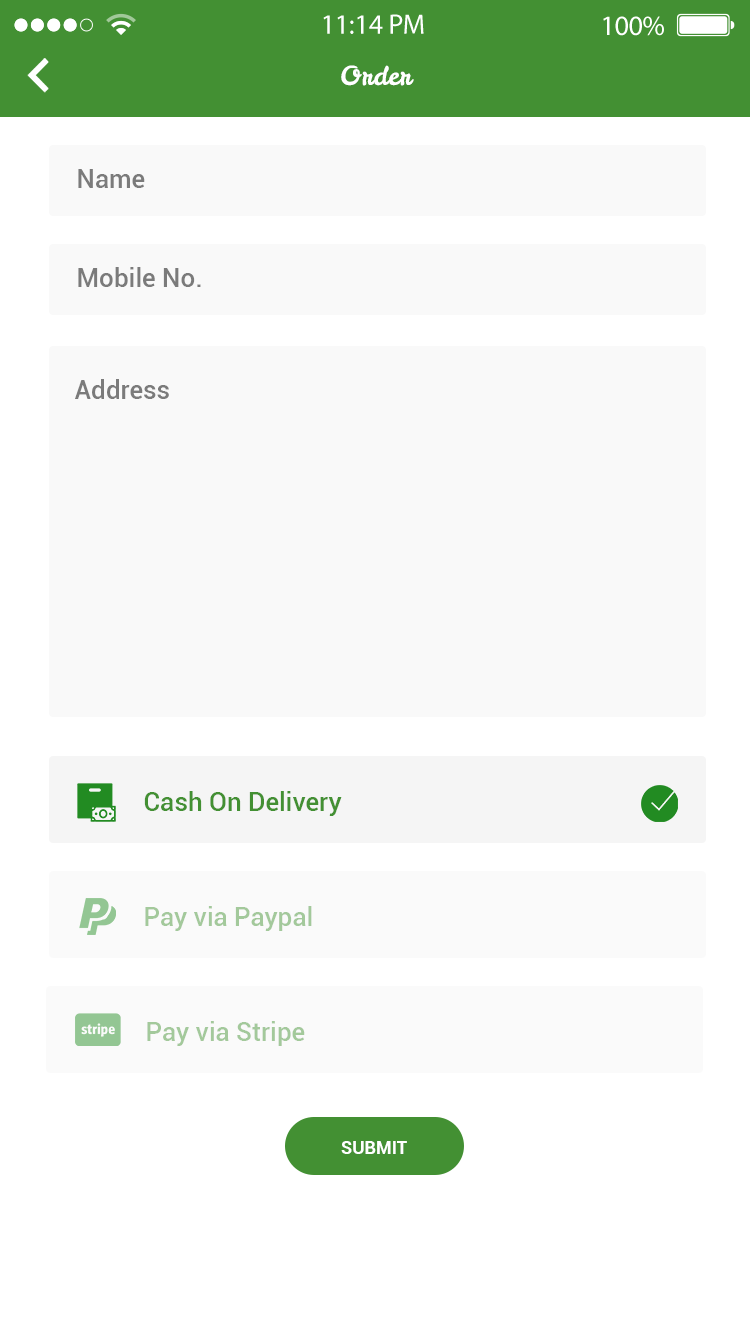
<style>
.page{position:relative;width:750px;height:1334px;background:#ffffff}
.page>*{position:absolute;margin:0}
.t1{font:26px "LeckerliOne-Regular";color:#ffffff}
.t2{font:26px "Roboto-Medium";color:#7b7b7b}
.t3{font:26px "Roboto-Medium";color:#439033}
.t4{font:26px "Roboto-Medium";color:#a3c99b}
.t5{font:18px "Roboto-Bold";color:#ffffff}
</style>
<div class="page">
<p class="t1" style="left:341px;top:65px;width:73px;height:21px">Order</p>
<p class="t2" style="left:78px;top:169px;width:67px;height:19px">Name</p>
<p class="t2" style="left:78px;top:267px;width:123px;height:20px">Mobile No.</p>
<p class="t2" style="left:75px;top:379px;width:94px;height:20px">Address</p>
<p class="t3" style="left:144px;top:791px;width:198px;height:25px">Cash On Delivery</p>
<p class="t4" style="left:145px;top:906px;width:167px;height:25px">Pay via Paypal</p>
<p class="t4" style="left:147px;top:1021px;width:158px;height:25px">Pay via Stripe</p>
<p class="t5" style="left:341px;top:1141px;width:66px;height:13px">SUBMIT</p>
</div>
